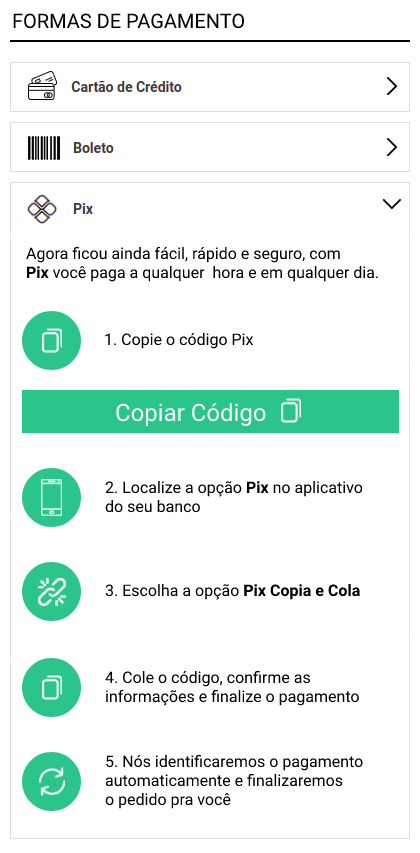
<style>
.page{position:relative;width:420px;height:853px;background:#ffffff}
.page>*{position:absolute;margin:0}
.t1{font:20px "Roboto-Regular";color:#000000}
.t2{font:16px "Roboto-Regular";color:#000000}
.t3{font:16px "Roboto-Bold";color:#000000}
.t4{font:24px "Roboto-Regular";color:#ffffff}
</style>
<div class="page">
<p class="t1" style="left:13px;top:13px;width:231px;height:16px">FORMAS DE PAGAMENTO</p>
<p class="t2" style="left:26px;top:246px;width:352px;height:36px">Agora ficou ainda fácil, rápido e seguro, com <br><span class="t3">Pix</span> você paga a qualquer  hora e em qualquer dia.</p>
<p class="t2" style="left:105px;top:333px;width:149px;height:16px">1. Copie o código Pix</p>
<p class="t4" style="left:116px;top:403px;width:150px;height:23px">Copiar Código</p>
<p class="t2" style="left:105px;top:481px;width:258px;height:32px">2. Localize a opção <span class="t3">Pix </span>no aplicativo <br>do seu banco</p>
<p class="t2" style="left:105px;top:584px;width:255px;height:16px">3. Escolha a opção <span class="t3">Pix Copia e Cola</span></p>
<p class="t2" style="left:105px;top:670px;width:254px;height:36px">4. Cole o código, confirme as <br>informações e finalize o pagamento</p>
<p class="t2" style="left:105px;top:754px;width:258px;height:55px">5. Nós identificaremos o pagamento <br>automaticamente e finalizaremos <br>o pedido pra você</p>
</div>
